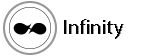
<style>
.page{position:relative;width:150px;height:56px;background:#ffffff}
.page>*{position:absolute;margin:0}
.t1{font:20.8px "MyriadPro-Regular";letter-spacing:0.01em;color:#020202}
.t2{font:20.8px "MyriadPro-Regular";letter-spacing:0.01em}
</style>
<div class="page">
<p class="t1" style="left:64px;top:19px;width:59px;height:20px">Infinity</p>
<p class="t2" style="left:65px;top:19px;width:59px;height:20px">Infinity</p>
</div>
